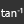
<style>
.page{position:relative;width:24px;height:24px;background:#333333}
.page>*{position:absolute;margin:0}
.t1{font:12px "SegoeUI";color:#ffffff;scale:0.96 1}
</style>
<div class="page">
<p class="t1" style="left:1px;top:7px;width:22px;height:10px">tan-1</p>
</div>
